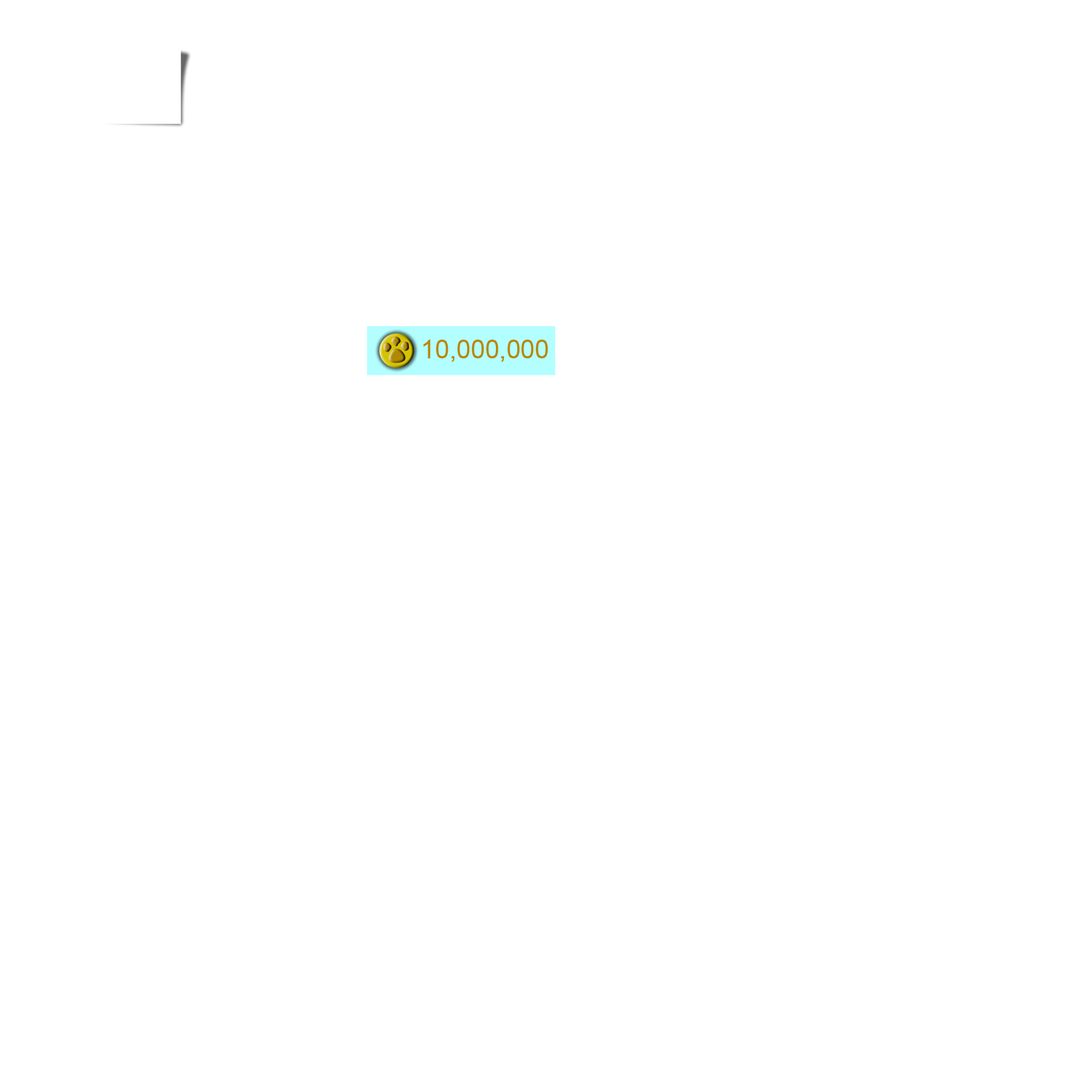
<style>
.page{position:relative;width:1092px;height:1092px;background:#ffffff}
.page>*{position:absolute;margin:0}
.t1{font:25.6px "ArialMT";color:#ba8608}
</style>
<div class="page">
<p class="t1" style="left:423px;top:340px;width:125px;height:22px">10,000,000</p>
</div>
